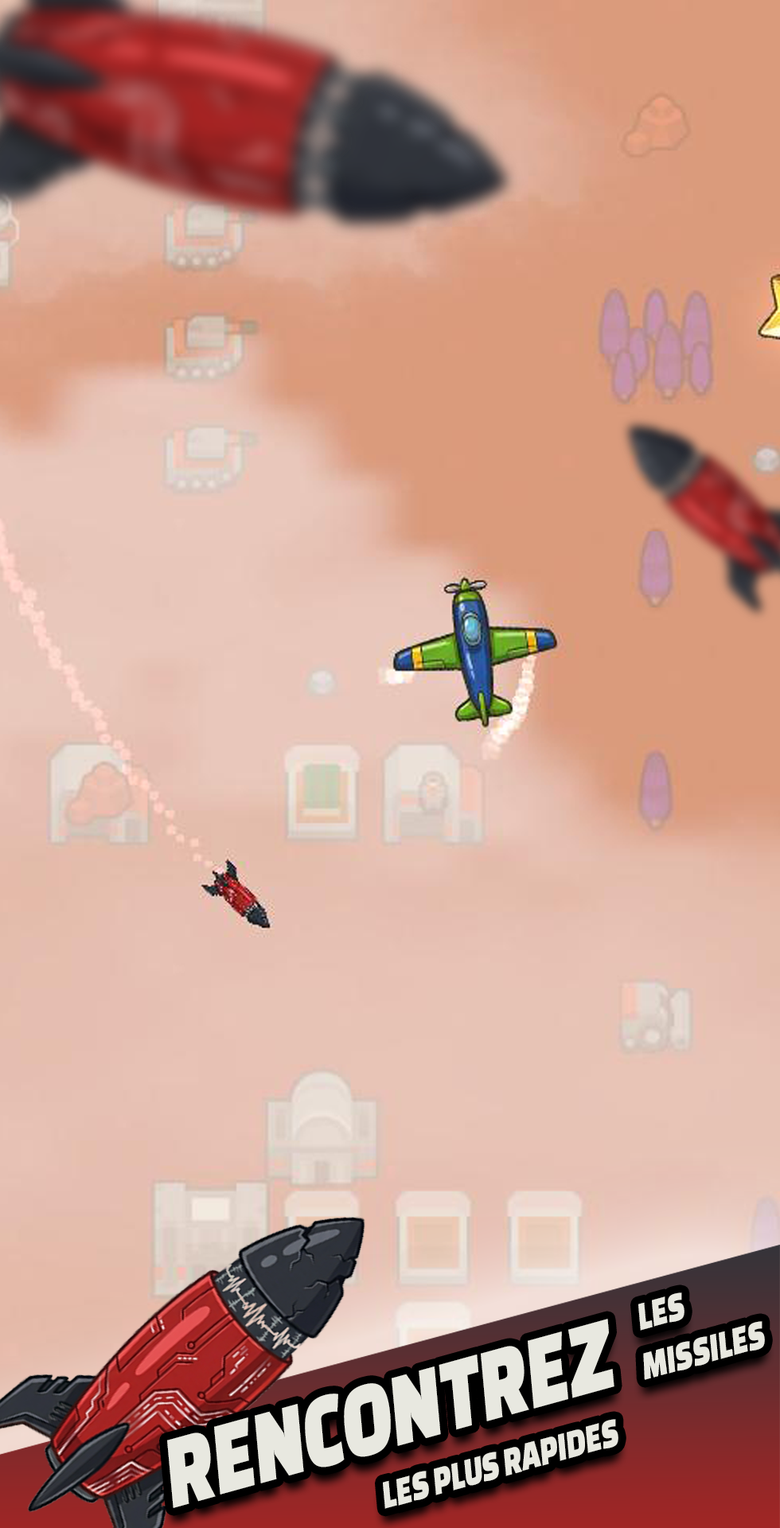
<style>
.page{position:relative;width:780px;height:1528px}
.page>*{position:absolute;margin:0}
.t1{font:41.8px "ChangaOne";color:#e8e8e0;scale:0.74 1}
.t2{font:108.4px "ChangaOne";color:#e8e8e0;scale:0.74 1}
</style>
<div class="page">
<p class="t1" style="left:638px;top:1293px;width:127px;height:87px;rotate:-15deg">LES<br>MISSILES</p>
<p class="t2" style="left:167px;top:1319px;width:448px;height:190px;rotate:-15deg">RENCONTREZ</p>
<p class="t1" style="left:383px;top:1419px;width:236px;height:90px;rotate:-15deg">LES PLUS RAPIDES</p>
</div>
